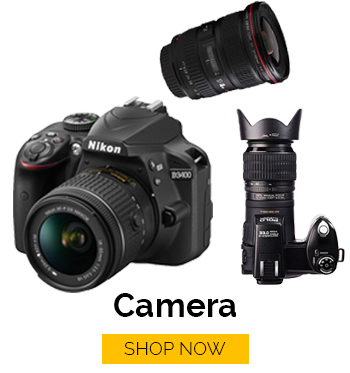
<style>
.page{position:relative;width:350px;height:373px;background:#ffffff}
.page>*{position:absolute;margin:0}
.t1{font:33.3px "Raleway-Bold";color:#000000}
.t2{font:18.5px "Raleway-Light";color:#000000}
</style>
<div class="page">
<p class="t1" style="left:114px;top:293px;width:122px;height:24px">Camera</p>
<p class="t2" style="left:124px;top:342px;width:102px;height:13px">SHOP NOW</p>
</div>
